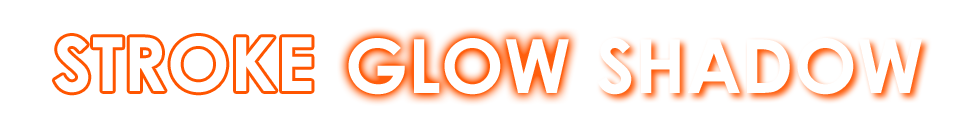
<style>
.page{position:relative;width:968px;height:138px;background:#ffffff}
.page>*{position:absolute;margin:0}
.t1{font:75px "CenturyGothic-Bold";color:#ffffff}
</style>
<div class="page">
<p class="t1" style="left:54px;top:36px;width:258px;height:57px">STROKE</p>
<p class="t1" style="left:348px;top:38px;width:221px;height:57px">GLOW</p>
<p class="t1" style="left:597px;top:38px;width:325px;height:57px">SHADOW</p>
</div>
